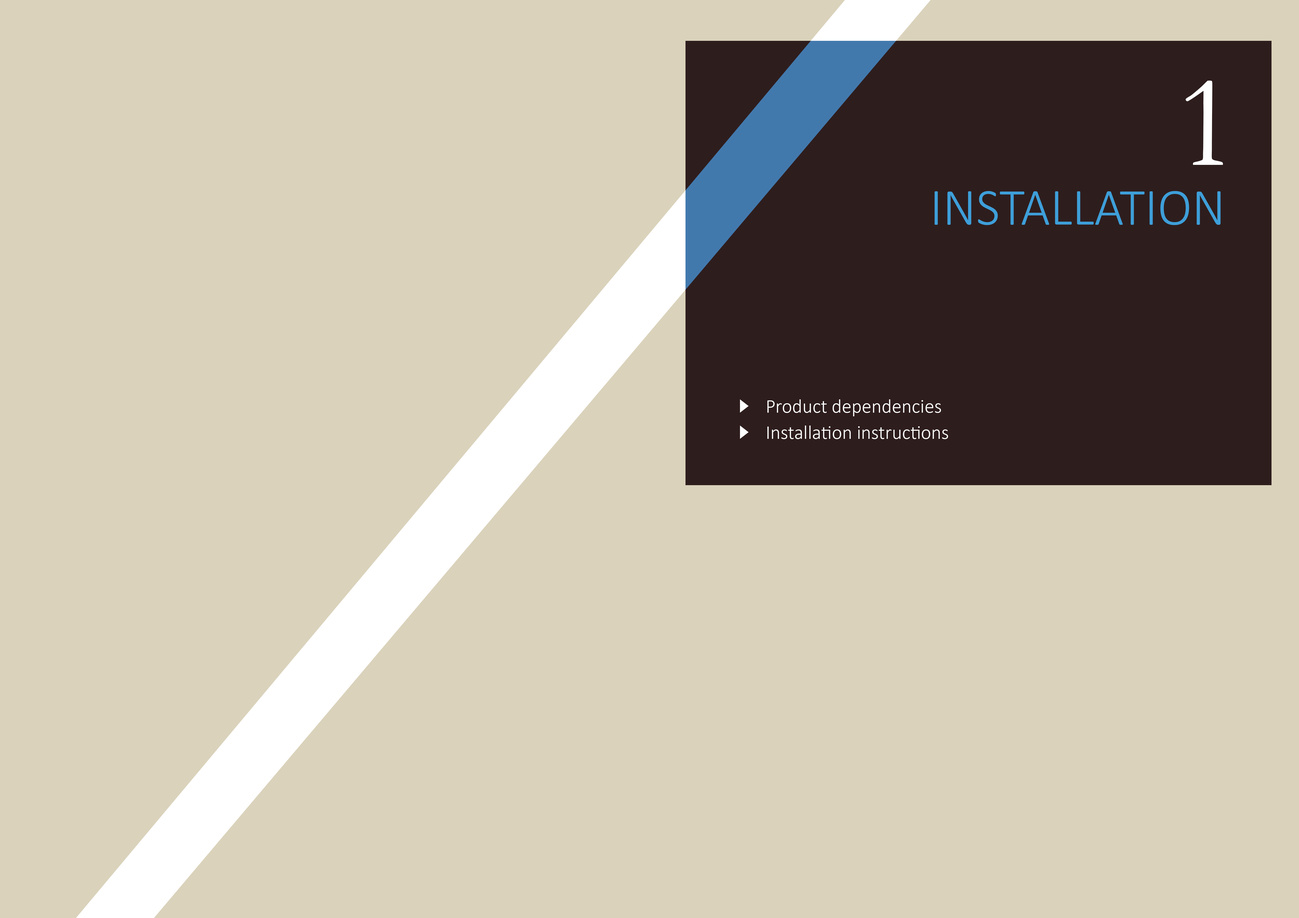
<style>
.page{position:relative;width:1299px;height:918px;background:#dad2bb}
.page>*{position:absolute;margin:0}
.t1{font:133.1px "Garamond";color:#ffffff}
.t2{font:52.4px "Calibri-Light";color:#3e9fd9;text-transform:uppercase}
.t3{font:19.6px/26.2px "Calibri-Light";color:#ffffff}
</style>
<div class="page">
<p class="t1" style="left:1185px;top:81px;width:38px;height:84px">1</p>
<p class="t2" style="left:934px;top:191px;width:286px;height:34px">installation</p>
<p class="t3" style="left:767px;top:399px;width:181px;height:40px">Product dependencies<br>Installation instructions</p>
</div>
